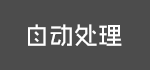
<style>
.page{position:relative;width:150px;height:70px;background:#4c4c4c}
.page>*{position:absolute;margin:0}
.t1{font:24px "RTWSShangGoG0v1-Regular";letter-spacing:0.022em;color:#ffffff}
</style>
<div class="page">
<p class="t1" style="left:28px;top:24px;width:94px;height:22px">自动处理</p>
</div>
